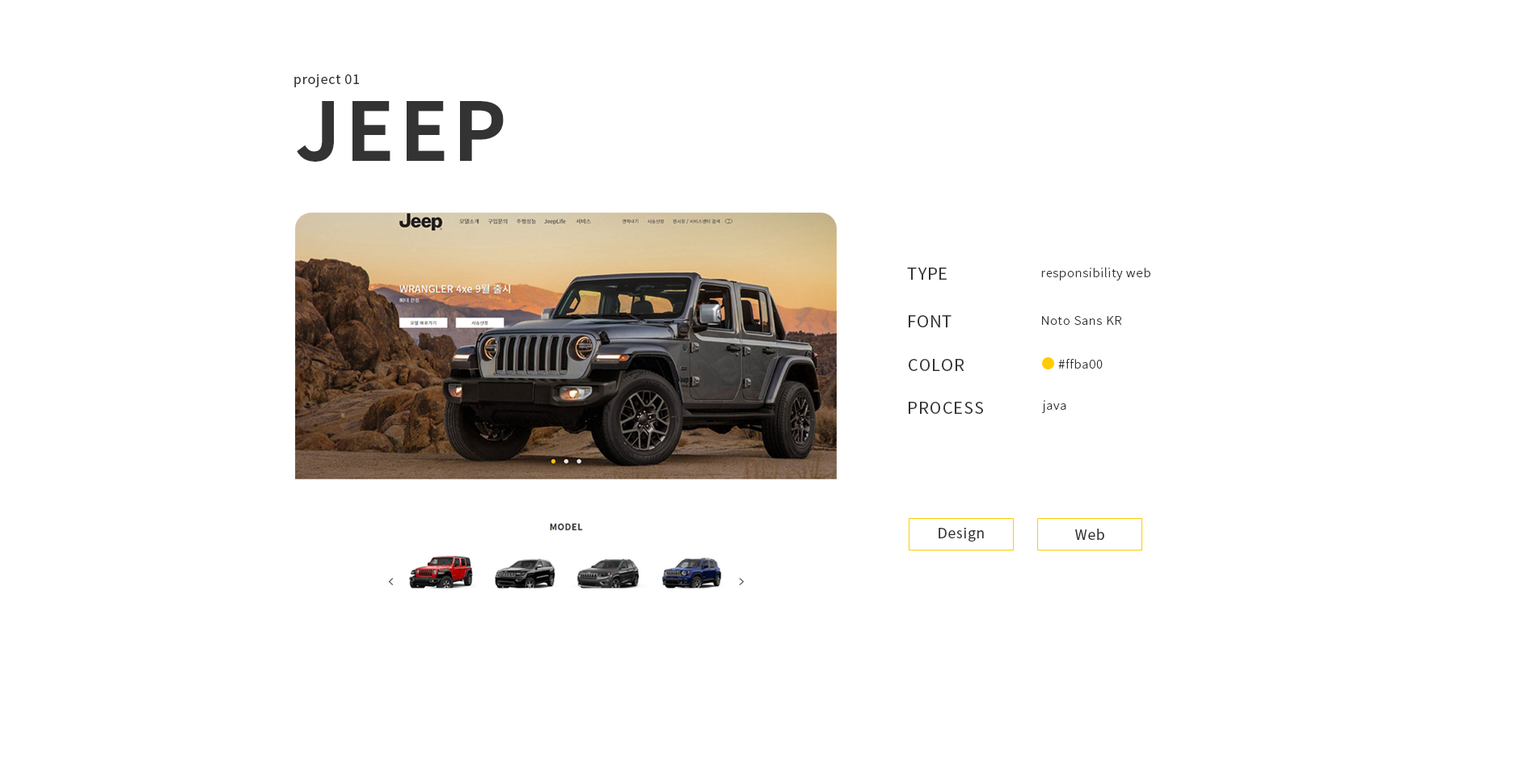
<style>
.page{position:relative;width:1536px;height:776px;background:#ffffff}
.page>*{position:absolute;margin:0}
.t1{font:12.9px "NotoSansKR-Regular";letter-spacing:0.05em;color:#333333}
.t2{font:80.9px "NotoSansKR-Bold";letter-spacing:0.05em;color:#333333}
.t3{font:16.2px "NotoSansKR-Regular";letter-spacing:0.05em;color:#333333}
.t4{font:12.1px "NotoSansKR-Light";letter-spacing:0.05em;color:#333333}
.t5{font:13.7px "NotoSansKR-Regular";letter-spacing:0.05em;color:#333333}
</style>
<div class="page">
<p class="t1" style="left:294px;top:74px;width:66px;height:13px">project 01</p>
<p class="t2" style="left:297px;top:101px;width:207px;height:61px">JEEP</p>
<p class="t3" style="left:907px;top:268px;width:40px;height:12px">TYPE</p>
<p class="t4" style="left:1041px;top:267px;width:110px;height:14px">responsibility web</p>
<p class="t3" style="left:909px;top:315px;width:43px;height:12px">FONT</p>
<p class="t4" style="left:1042px;top:316px;width:80px;height:9px">Noto Sans KR</p>
<p class="t3" style="left:909px;top:359px;width:56px;height:12px">COLOR</p>
<p class="t4" style="left:1058px;top:359px;width:45px;height:10px">#ffba00</p>
<p class="t3" style="left:909px;top:402px;width:74px;height:12px">PROCESS</p>
<p class="t4" style="left:1042px;top:400px;width:24px;height:13px">java</p>
<p class="t5" style="left:939px;top:527px;width:45px;height:15px">Design</p>
<p class="t5" style="left:1075px;top:529px;width:29px;height:11px">Web</p>
</div>
